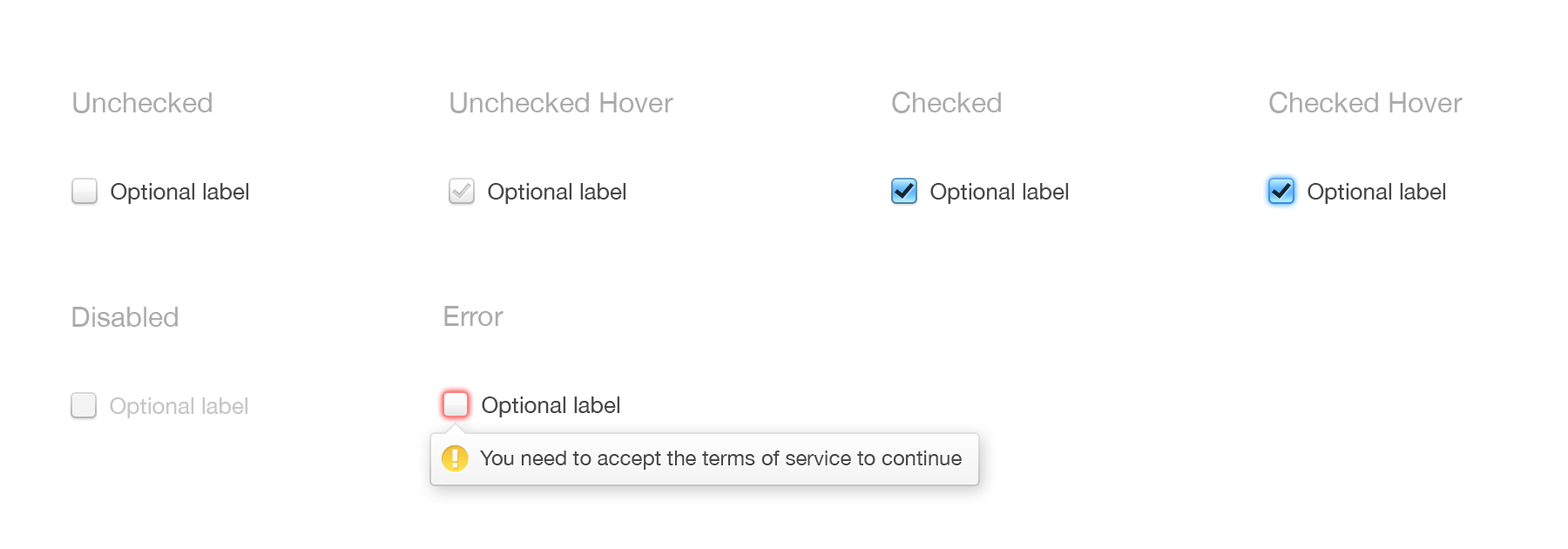
<style>
.page{position:relative;width:1568px;height:549px;background:#ffffff}
.page>*{position:absolute;margin:0}
.t1{font:27.9px "HelveticaNeue";color:#ababab}
.t2{font:22.6px "HelveticaNeue";color:#474747}
.t3{font:22.6px "HelveticaNeue";color:#c6c6c6}
.t4{font:20.9px "HelveticaNeue";color:#474747}
</style>
<div class="page">
<p class="t1" style="left:73px;top:92px;width:139px;height:21px">Unchecked</p>
<p class="t1" style="left:450px;top:92px;width:223px;height:21px">Unchecked Hover</p>
<p class="t1" style="left:892px;top:91px;width:109px;height:22px">Checked</p>
<p class="t1" style="left:1269px;top:91px;width:194px;height:22px">Checked Hover</p>
<p class="t2" style="left:111px;top:183px;width:138px;height:21px">Optional label</p>
<p class="t2" style="left:488px;top:183px;width:138px;height:21px">Optional label</p>
<p class="t2" style="left:930px;top:183px;width:139px;height:21px">Optional label</p>
<p class="t2" style="left:1308px;top:183px;width:138px;height:21px">Optional label</p>
<p class="t1" style="left:444px;top:306px;width:60px;height:20px">Error</p>
<p class="t1" style="left:72px;top:307px;width:106px;height:20px">Disabled</p>
<p class="t3" style="left:110px;top:397px;width:138px;height:21px">Optional label</p>
<p class="t2" style="left:482px;top:396px;width:138px;height:21px">Optional label</p>
<p class="t4" style="left:480px;top:450px;width:482px;height:20px">You need to accept the terms of service to continue</p>
</div>
